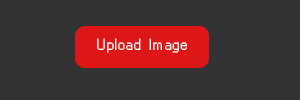
<style>
.page{position:relative;width:300px;height:100px;background:#333333}
.page>*{position:absolute;margin:0}
.t1{font:14px "MS Sans Serif";color:#ffffff}
.t2{font:14px "Verdana-Bold";color:#ffffff}
</style>
<div class="page">
<p class="t1" style="left:97px;top:38px;width:90px;height:15px"><span class="t2"> </span>Upload  Image</p>
</div>
